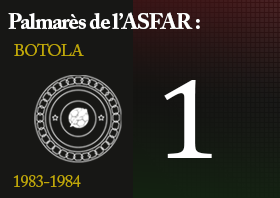
<style>
.page{position:relative;width:280px;height:198px;background:#171715}
.page>*{position:absolute;margin:0}
.t1{font:22.2px "ACaslonPro-Bold";letter-spacing:-0.04em;color:#ffffff}
.t2{font:16.7px "ACaslonPro-Regular";letter-spacing:-0.04em;color:#c0a808}
.t3{font:114.8px "CambriaMath";letter-spacing:-0.04em;color:#ffffff;scale:1.05 1}
</style>
<div class="page">
<p class="t1" style="left:8px;top:12px;width:192px;height:17px">Palmarès de l’ASFAR :</p>
<p class="t2" style="left:14px;top:43px;width:70px;height:13px">BOTOLA</p>
<p class="t3" style="left:164px;top:80px;width:48px;height:78px">1</p>
<p class="t2" style="left:13px;top:175px;width:68px;height:12px">1983-1984</p>
</div>
